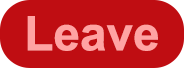
<style>
.page{position:relative;width:184px;height:68px;background:#bf0d12}
.page>*{position:absolute;margin:0}
.t1{font:48px "Arial-BoldMT";color:#ffa3a3}
</style>
<div class="page">
<p class="t1" style="left:27px;top:16px;width:131px;height:35px">Leave</p>
</div>
